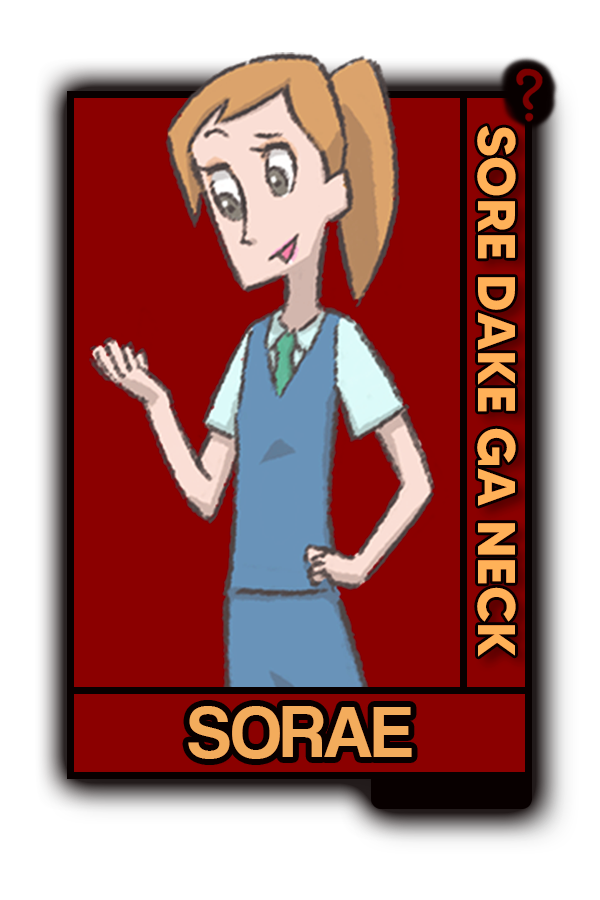
<style>
.page{position:relative;width:600px;height:900px;background:#8b0000}
.page>*{position:absolute;margin:0}
.t1{font:52.7px "MADETOMMY-Bold";color:#ffb158}
.t2{font:75px "CoolveticaRg-Regular";color:#f3ac5c}
</style>
<div class="page">
<p class="t1" style="left:477px;top:126px;width:39px;height:531px;rotate:90deg">SORE DAKE GA NECK</p>
<p class="t2" style="left:188px;top:706px;width:224px;height:53px">SORAE</p>
</div>
